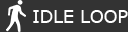
<style>
.page{position:relative;width:128px;height:32px;background:#333333}
.page>*{position:absolute;margin:0}
.t1{font:17.5px "Verdana";color:#ffffff}
</style>
<div class="page">
<p class="t1" style="left:33px;top:10px;width:95px;height:13px">IDLE LOOP</p>
</div>
